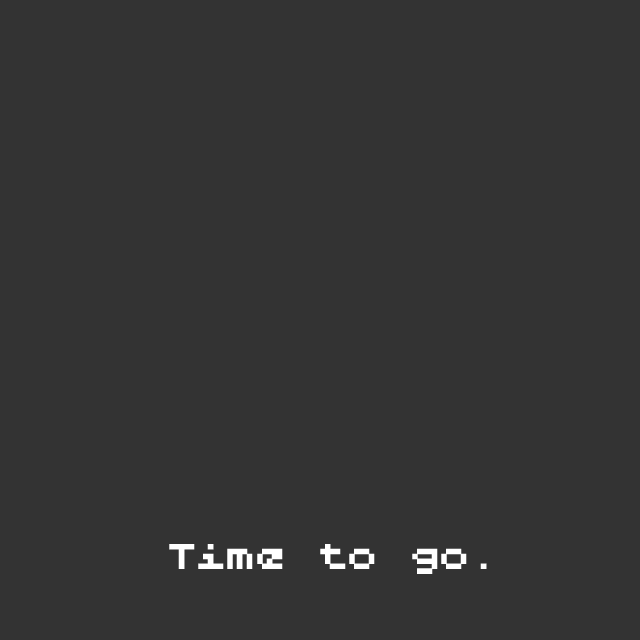
<style>
.page{position:relative;width:640px;height:640px;background:#333333}
.page>*{position:absolute;margin:0}
.t1{font:41px "LilliputSteps-Regular";color:#ffffff}
</style>
<div class="page">
<p class="t1" style="left:169px;top:544px;width:318px;height:30px">Time to go.</p>
</div>
